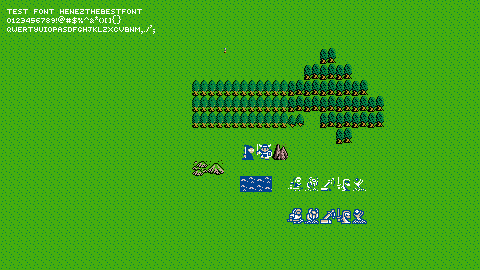
<style>
.page{position:relative;width:480px;height:270px;background:#46ae0e}
.page>*{position:absolute;margin:0}
.t1{font:15px/9px "HenezTheBestFont";color:#fcfcfc}
</style>
<div class="page">
<p class="t1" style="left:7px;top:9px;width:148px;height:25px">TEST FONT HENEZTHEBESTFONT<br>0123456789!@#$%^&amp;*()[]{}<br>QWERTYUIOPASDFGHJKLZXCVBNM,./’;</p>
</div>
